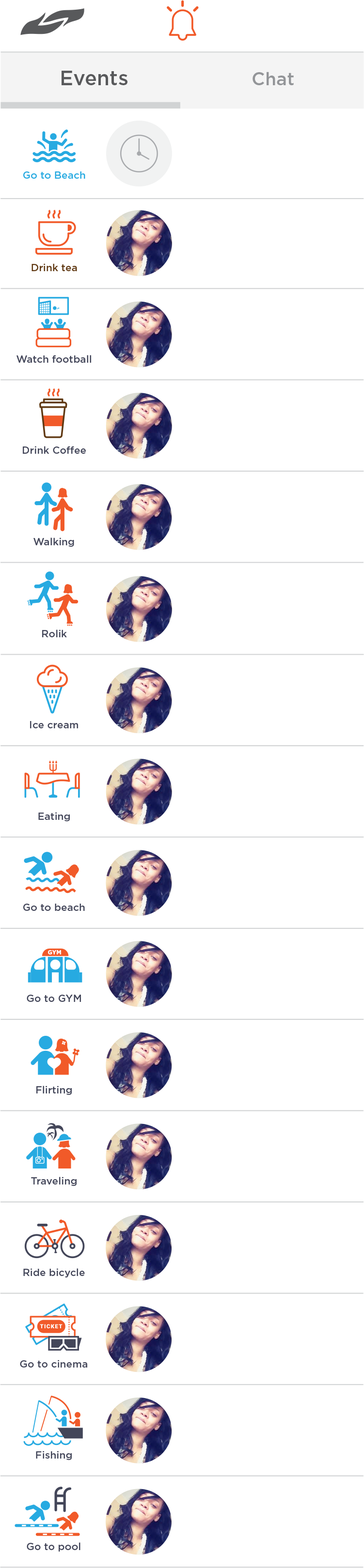
<style>
.page{position:relative;width:364px;height:1568px;background:#ffffff}
.page>*{position:absolute;margin:0}
.t1{font:20.4px "Gotham-Medium";color:#58595b}
.t2{font:18.1px "Gotham-Medium";color:#939598}
.t3{font:10.2px "Gotham-Medium";color:#27aae1}
.t4{font:10.2px "Gotham-Medium";color:#603913}
.t5{font:10.2px "Gotham-Medium";color:#434659}
.t6{font:5.8px "Gotham-Black";color:#ffffff}
</style>
<div class="page">
<p class="t1" style="left:61px;top:71px;width:66px;height:14px">Events</p>
<p class="t2" style="left:252px;top:72px;width:41px;height:13px">Chat</p>
<p class="t3" style="left:23px;top:171px;width:62px;height:8px">Go to Beach</p>
<p class="t4" style="left:31px;top:263px;width:46px;height:8px">Drink tea</p>
<p class="t5" style="left:16px;top:355px;width:75px;height:8px">Watch football</p>
<p class="t5" style="left:23px;top:446px;width:63px;height:8px">Drink Coffee</p>
<p class="t5" style="left:33px;top:538px;width:41px;height:9px">Walking</p>
<p class="t5" style="left:42px;top:630px;width:25px;height:7px">Rolik</p>
<p class="t5" style="left:30px;top:721px;width:48px;height:7px">Ice cream</p>
<p class="t5" style="left:38px;top:812px;width:32px;height:9px">Eating</p>
<p class="t5" style="left:23px;top:904px;width:62px;height:7px">Go to beach</p>
<p class="t6" style="left:48px;top:950px;width:13px;height:4px">GYM</p>
<p class="t5" style="left:27px;top:995px;width:54px;height:7px">Go to GYM</p>
<p class="t5" style="left:36px;top:1086px;width:36px;height:9px">Flirting</p>
<p class="t5" style="left:31px;top:1177px;width:46px;height:9px">Traveling</p>
<p class="t5" style="left:23px;top:1268px;width:62px;height:9px">Ride bicycle</p>
<p class="t5" style="left:20px;top:1360px;width:67px;height:8px">Go to cinema</p>
<p class="t5" style="left:36px;top:1451px;width:36px;height:9px">Fishing</p>
<p class="t5" style="left:27px;top:1542px;width:53px;height:10px">Go to pool</p>
</div>
